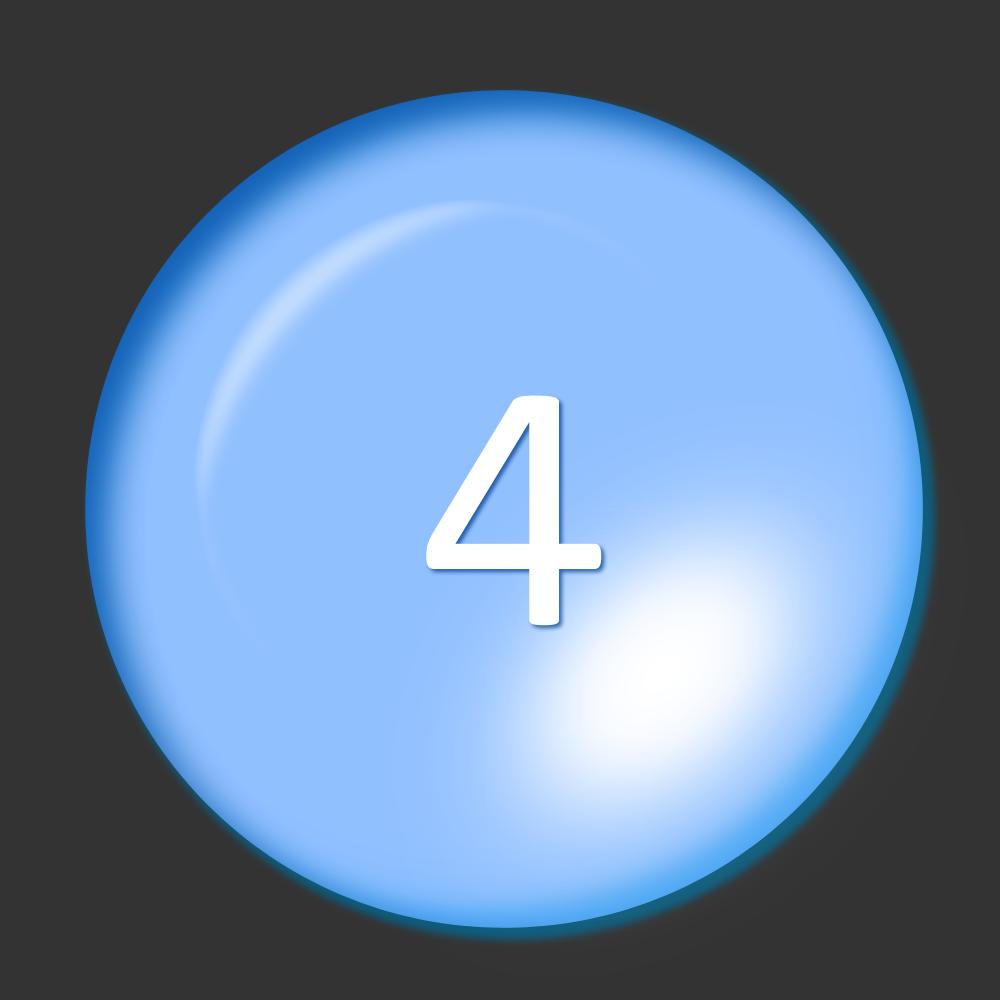
<style>
.page{position:relative;width:1000px;height:1000px;background:#333333}
.page>*{position:absolute;margin:0}
.t1{font:360px "Calibri";color:#ffffff}
</style>
<div class="page">
<p class="t1" style="left:426px;top:395px;width:176px;height:231px">4</p>
</div>
